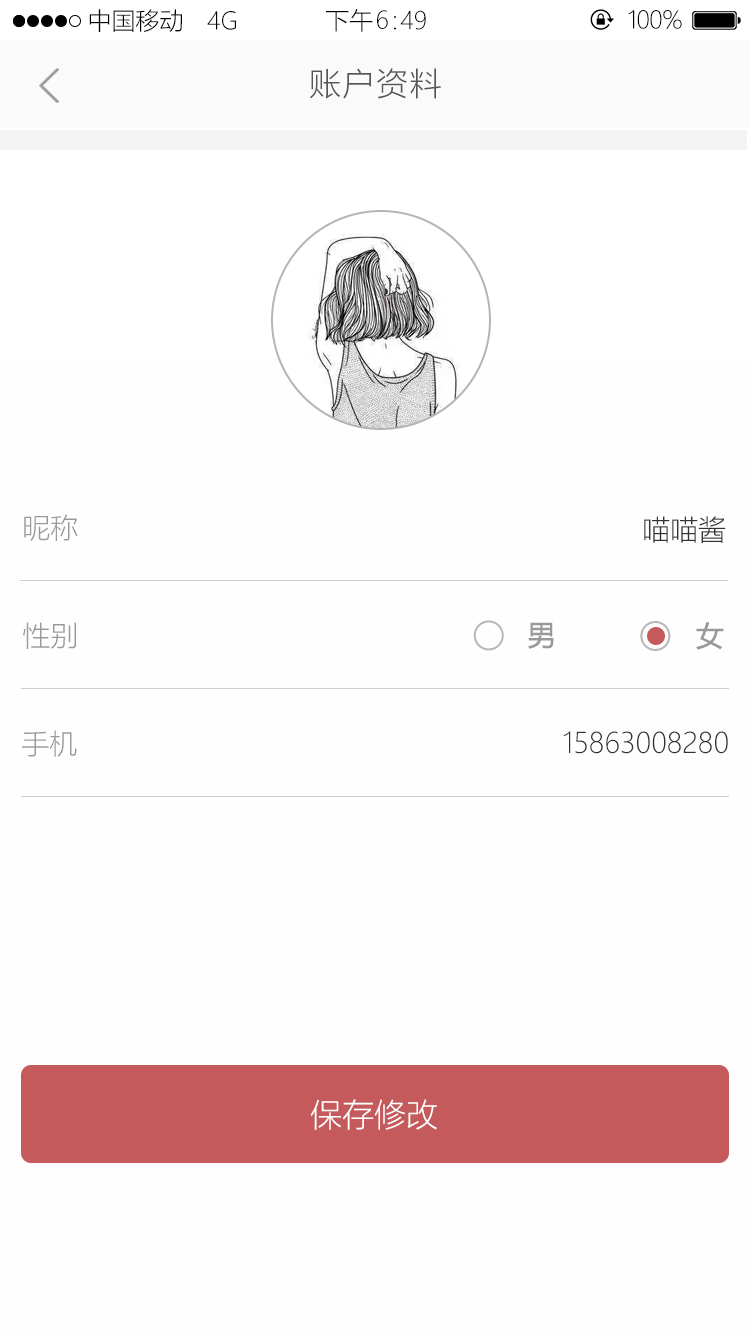
<style>
.page{position:relative;width:750px;height:1334px;background:#fefefe}
.page>*{position:absolute;margin:0}
.t1{font:24px "MicrosoftYaHeiUILight";color:#000000}
.t2{font:32px "MicrosoftYaHeiUILight";letter-spacing:0.05em;color:#555555}
.t3{font:28px "MicrosoftYaHeiUILight";color:#999999}
.t4{font:28px "MicrosoftYaHeiUILight";color:#333333}
.t5{font:28px "MicrosoftYaHeiUI";color:#999999;font-weight:bold}
.t6{font:32px "MicrosoftYaHeiUILight";color:#ffffff}
</style>
<div class="page">
<p class="t1" style="left:89px;top:9px;width:93px;height:23px">中国移动</p>
<p class="t1" style="left:207px;top:11px;width:29px;height:19px">4G</p>
<p class="t1" style="left:326px;top:9px;width:47px;height:23px">下午</p>
<p class="t1" style="left:377px;top:10px;width:11px;height:19px">6</p>
<p class="t1" style="left:394px;top:16px;width:2px;height:14px">：</p>
<p class="t1" style="left:400px;top:10px;width:26px;height:20px">49</p>
<p class="t1" style="left:628px;top:10px;width:54px;height:19px">100%</p>
<p class="t2" style="left:310px;top:68px;width:131px;height:31px">账户资料</p>
<p class="t3" style="left:24px;top:514px;width:54px;height:27px">昵称</p>
<p class="t4" style="left:644px;top:516px;width:82px;height:27px">喵喵酱</p>
<p class="t3" style="left:23px;top:622px;width:53px;height:27px">性别</p>
<p class="t5" style="left:528px;top:622px;width:26px;height:27px">男</p>
<p class="t5" style="left:696px;top:622px;width:28px;height:28px">女</p>
<p class="t3" style="left:22px;top:730px;width:55px;height:27px">手机</p>
<p class="t4" style="left:563px;top:731px;width:165px;height:23px">15863008280</p>
<p class="t6" style="left:310px;top:1099px;width:127px;height:31px">保存修改</p>
</div>
